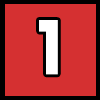
<style>
.page{position:relative;width:100px;height:100px;background:#d53031}
.page>*{position:absolute;margin:0}
.t1{font:83.3px "TwCenMT-CondensedExtraBold";color:#ffffff}
</style>
<div class="page">
<p class="t1" style="left:39px;top:20px;width:19px;height:55px">1</p>
</div>
